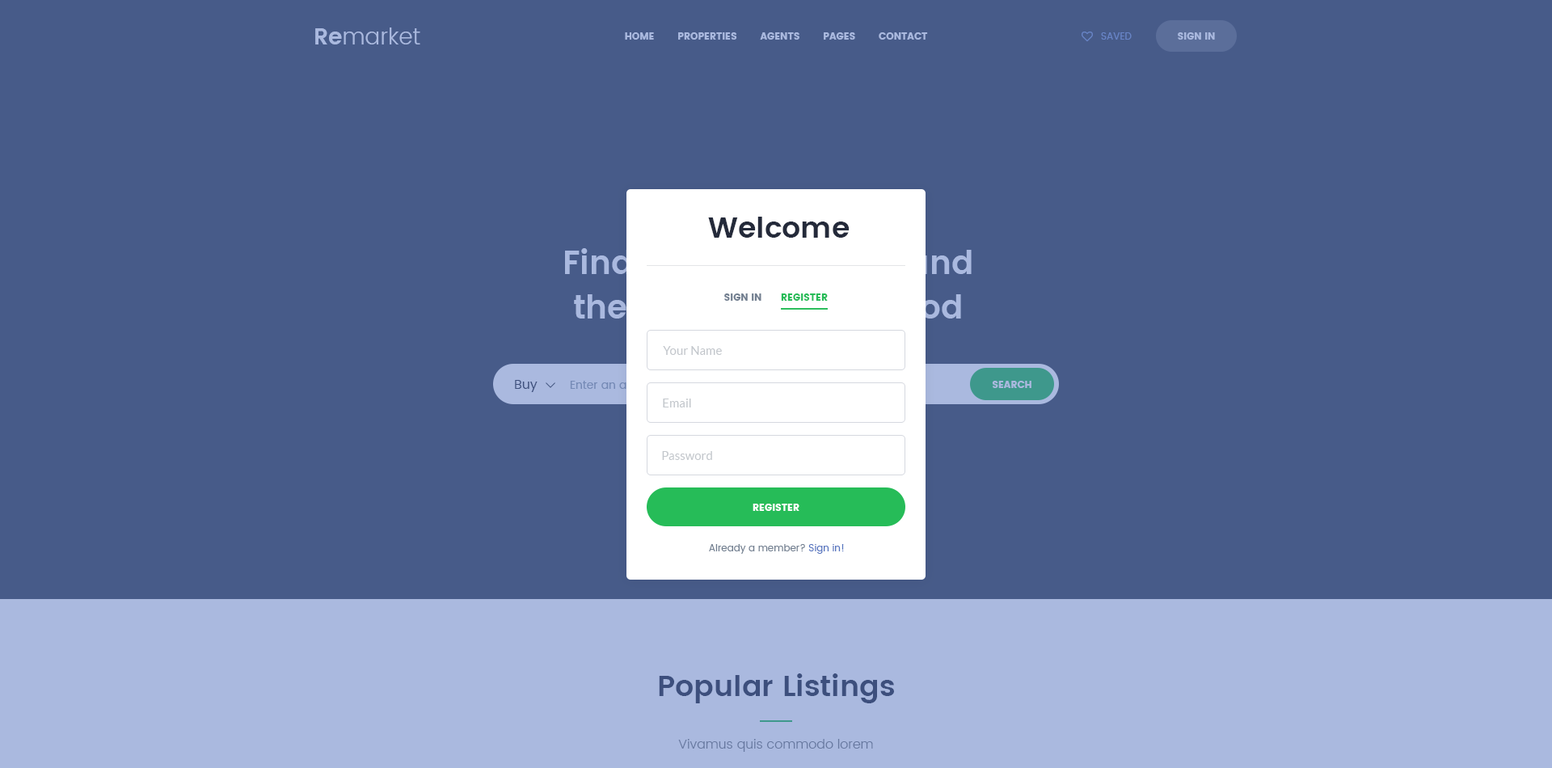
<style>
.page{position:relative;width:1552px;height:768px;background:#475b89}
.page>*{position:absolute;margin:0}
.t1{font:22.6px "Poppins-Light";color:#aab9df}
.t2{font:22.6px "Poppins-SemiBold";color:#aab9df}
.t3{font:9.7px "Poppins";color:#aab9df;text-transform:uppercase}
.t4{font:9.7px "Poppins-Regular";color:#7b95cd;text-transform:uppercase}
.t5{font:29.1px "Poppins-SemiBold";color:#242a3a}
.t6{font:9.7px "Poppins";color:#727f90;text-transform:uppercase}
.t7{font:9.7px "Poppins";color:#26bc58;text-transform:uppercase}
.t8{font:12.1px "Lato-Regular";color:#c3c7cc}
.t9{font:12.9px "Poppins-Regular";color:#3d4f7d}
.t10{font:9.7px "Poppins";color:#ffffff;text-transform:uppercase}
.t11{font:9.7px "Poppins-Regular";color:#727f90}
.t12{font:9.7px "Poppins-Regular";color:#5574bf}
.t13{font:29.1px "Poppins-SemiBold";color:#3d4f7d}
.t14{font:12.9px "Poppins-Light";color:#6778a0}
</style>
<div class="page">
<p class="t1" style="left:315px;top:27px;width:105px;height:17px"><span class="t2">Re</span>market</p>
<p class="t3" style="left:625px;top:32px;width:303px;height:8px">Home        Properties        Agents        Pages        Contact</p>
<p class="t4" style="left:1101px;top:32px;width:31px;height:8px">Saved</p>
<p class="t3" style="left:1178px;top:32px;width:37px;height:8px">Sign In</p>
<p class="t5" style="left:708px;top:217px;width:142px;height:21px">Welcome</p>
<p class="t6" style="left:724px;top:294px;width:38px;height:7px">Sign In</p>
<p class="t7" style="left:781px;top:294px;width:47px;height:7px">Register</p>
<p class="t8" style="left:663px;top:346px;width:59px;height:9px">Your Name</p>
<p class="t9" style="left:515px;top:380px;width:23px;height:12px">Buy</p>
<p class="t3" style="left:992px;top:381px;width:40px;height:7px">Search</p>
<p class="t8" style="left:663px;top:399px;width:28px;height:9px">Email</p>
<p class="t8" style="left:662px;top:451px;width:50px;height:9px">Password</p>
<p class="t10" style="left:753px;top:504px;width:47px;height:7px">Register</p>
<p class="t11" style="left:709px;top:544px;width:135px;height:10px">Already a member?<span class="t12"> Sign in!</span></p>
<p class="t13" style="left:659px;top:674px;width:235px;height:29px">Popular Listings</p>
<p class="t14" style="left:678px;top:739px;width:195px;height:13px">Vivamus quis commodo lorem</p>
</div>
